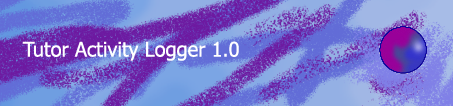
<style>
.page{position:relative;width:453px;height:106px}
.page>*{position:absolute;margin:0}
.t1{font:20px "Tahoma";color:#ffffff}
</style>
<div class="page">
<p class="t1" style="left:22px;top:41px;width:217px;height:20px">Tutor Activity Logger 1.0</p>
</div>
